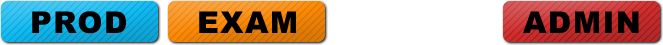
<style>
.page{position:relative;width:663px;height:45px;background:#ffffff}
.page>*{position:absolute;margin:0}
.t1{font:30px "Arial-Black";letter-spacing:0.05em;color:#000000}
</style>
<div class="page">
<p class="t1" style="left:32px;top:11px;width:94px;height:23px">PROD</p>
<p class="t1" style="left:199px;top:11px;width:97px;height:22px">EXAM</p>
<p class="t1" style="left:523px;top:11px;width:116px;height:22px">ADMIN</p>
</div>
